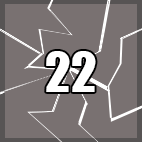
<style>
.page{position:relative;width:142px;height:142px;background:#797171}
.page>*{position:absolute;margin:0}
.t1{font:51px "Impact";color:#ffffff}
</style>
<div class="page">
<p class="t1" style="left:46px;top:51px;width:50px;height:41px">22</p>
</div>
